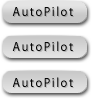
<style>
.page{position:relative;width:92px;height:99px}
.page>*{position:absolute;margin:0}
.t1{font:13.1px "MyriadPro-Regular";letter-spacing:0.12em;color:#040404;scale:0.95 1}
</style>
<div class="page">
<p class="t1" style="left:12px;top:6px;width:61px;height:10px">AutoPilot</p>
<p class="t1" style="left:12px;top:41px;width:61px;height:10px">AutoPilot</p>
<p class="t1" style="left:12px;top:77px;width:61px;height:10px">AutoPilot</p>
</div>
